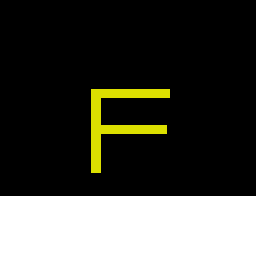
<style>
.page{position:relative;width:256px;height:256px;background:#000000}
.page>*{position:absolute;margin:0}
.t1{font:112px "Michroma";color:#dcdf00}
</style>
<div class="page">
<p class="t1" style="left:91px;top:89px;width:79px;height:84px">F</p>
</div>
